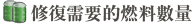
<style>
.page{position:relative;width:193px;height:25px;background:#ffffff}
.page>*{position:absolute;margin:0}
.t1{font:18px "RyuminPr6N-ExBold";color:#4c4843}
</style>
<div class="page">
<p class="t1" style="left:31px;top:4px;width:161px;height:18px">修復需要的燃料數量</p>
</div>
